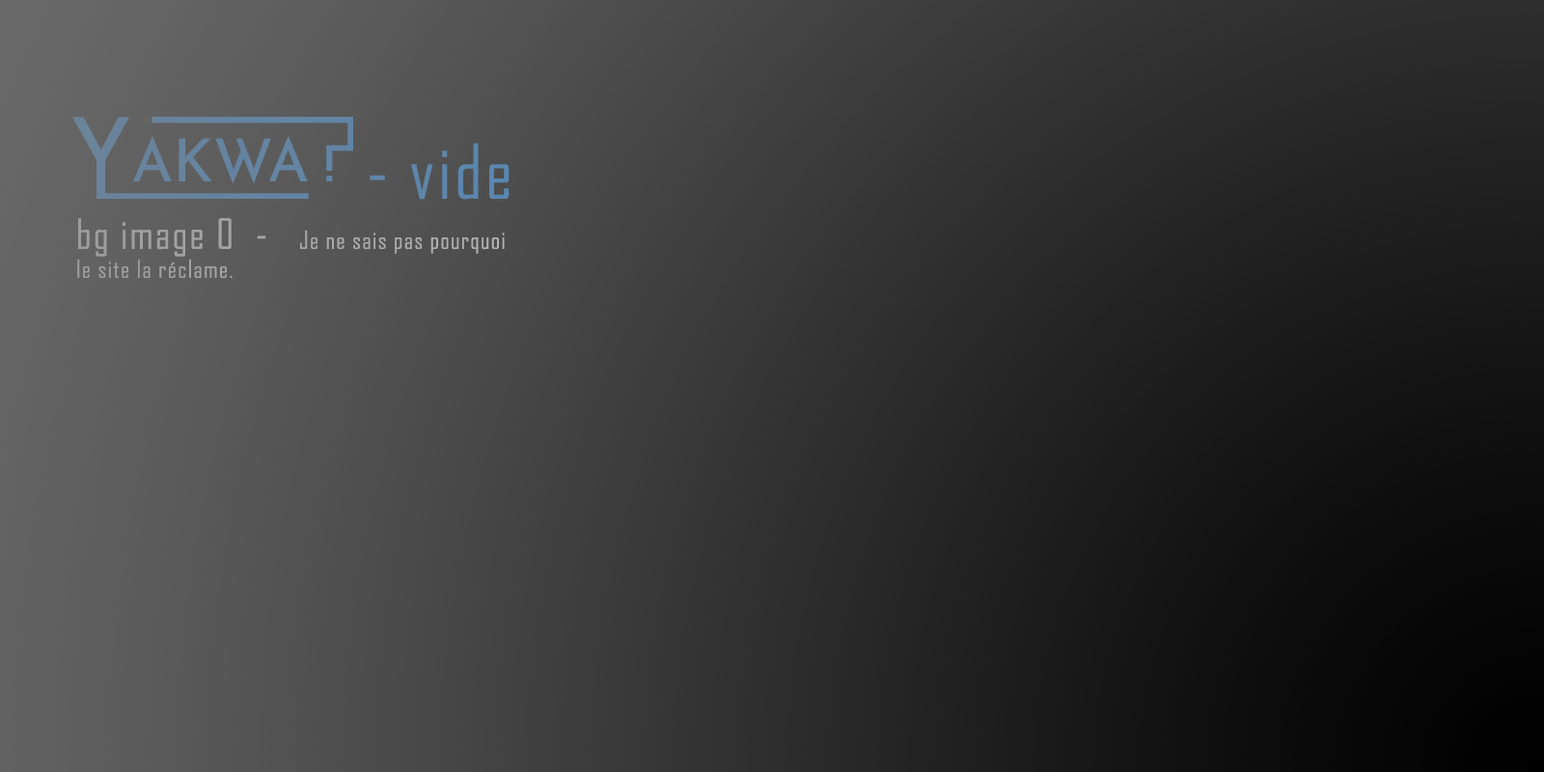
<style>
.page{position:relative;width:1544px;height:772px}
.page>*{position:absolute;margin:0}
.t1{font:72.4px "AgencyFB-Reg";letter-spacing:0.05em;color:#5b86ad}
.t2{font:96.5px "AgencyFB-Reg";letter-spacing:0.05em;color:#5b86ad}
.t3{font:24.1px "AgencyFB-Reg";letter-spacing:0.05em;color:#a2a2a2}
.t4{font:40.2px "AgencyFB-Reg";letter-spacing:0.05em;color:#a2a2a2}
</style>
<div class="page">
<p class="t1" style="left:370px;top:143px;width:140px;height:57px"><span class="t2">            </span>- vide</p>
<p class="t3" style="left:77px;top:218px;width:428px;height:61px"><span class="t4">bg image 0  -   </span>Je ne sais pas pourquoi<br>le site la réclame.</p>
</div>
